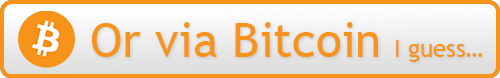
<style>
.page{position:relative;width:500px;height:78px;background:#f7931a}
.page>*{position:absolute;margin:0}
.t1{font:48px "TrebuchetMS";color:#f7931a}
.t2{font:24px "TrebuchetMS";color:#f7931a}
</style>
<div class="page">
<p class="t1" style="left:91px;top:22px;width:287px;height:35px">Or via Bitcoin</p>
<p class="t2" style="left:396px;top:40px;width:86px;height:22px">I guess…</p>
</div>
